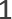
<style>
.page{position:relative;width:12px;height:19px;background:#ffffff}
.page>*{position:absolute;margin:0}
.t1{font:30px "Calibri";color:#3c3c3c}
</style>
<div class="page">
<p class="t1" style="left:0px;top:0px;width:12px;height:19px">1</p>
</div>
